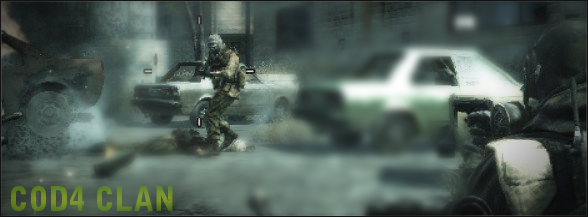
<style>
.page{position:relative;width:588px;height:217px}
.page>*{position:absolute;margin:0}
.t1{font:32.7px "BellGothicStd-Black";color:#698828;scale:0.93 1}
</style>
<div class="page">
<p class="t1" style="left:11px;top:186px;width:162px;height:25px">COD4 CLAN</p>
</div>
